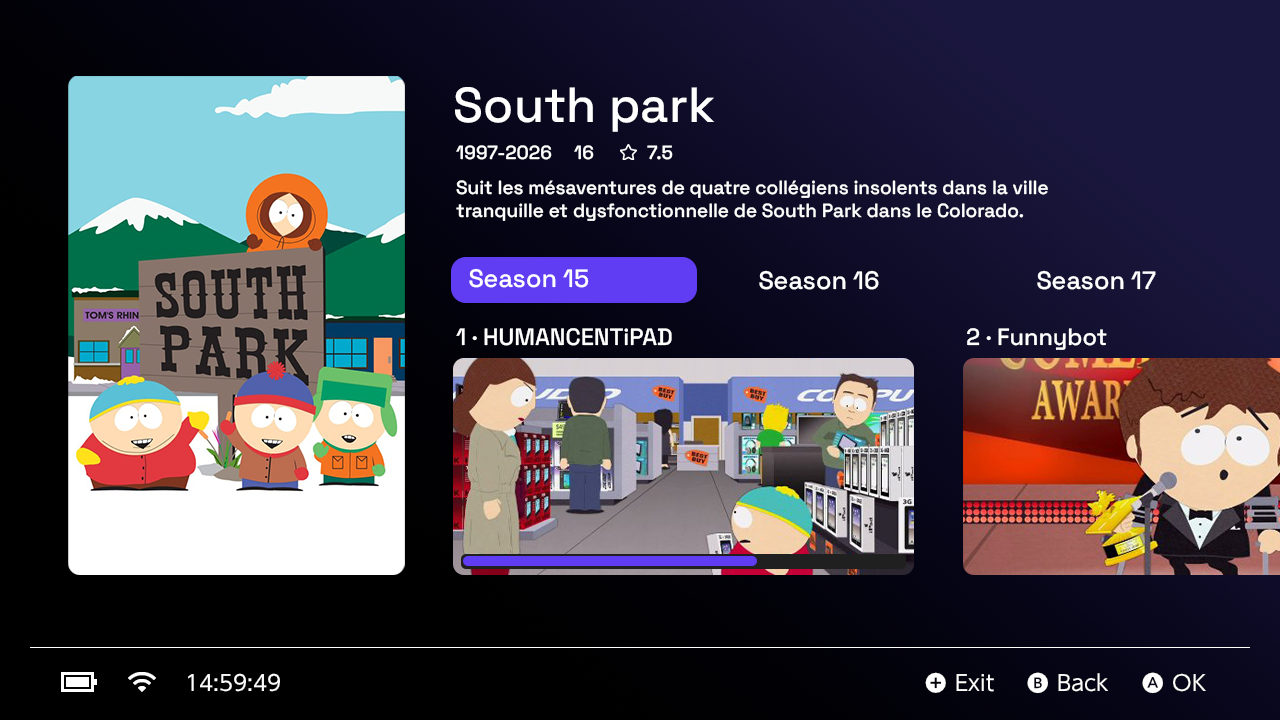
<style>
.page{position:relative;width:1280px;height:720px}
.page>*{position:absolute;margin:0}
.t1{font:49.1px "SpaceGrotesk-Medium";color:#ffffff}
.t2{font:19px "SpaceGrotesk-Medium";color:#ffffff}
.t3{font:25.1px "SpaceGrotesk-Medium";color:#ffffff}
.t4{font:23.6px "SpaceGrotesk-Medium";color:#ffffff}
</style>
<div class="page">
<p class="t1" style="left:455px;top:87px;width:260px;height:45px">South park</p>
<p class="t2" style="left:456px;top:145px;width:96px;height:15px">1997-2026</p>
<p class="t2" style="left:574px;top:145px;width:20px;height:15px">16</p>
<p class="t2" style="left:647px;top:145px;width:26px;height:15px">7.5</p>
<p class="t2" style="left:456px;top:180px;width:592px;height:41px">Suit les mésaventures de quatre collégiens insolents dans la ville tranquille et dysfonctionnelle de South Park dans le Colorado.</p>
<p class="t3" style="left:469px;top:268px;width:120px;height:20px">Season 15</p>
<p class="t3" style="left:759px;top:270px;width:120px;height:20px">Season 16</p>
<p class="t3" style="left:1037px;top:270px;width:119px;height:20px">Season 17</p>
<p class="t4" style="left:456px;top:328px;width:216px;height:18px">1 · HUMANCENTiPAD</p>
<p class="t4" style="left:967px;top:328px;width:140px;height:22px">2 · Funnybot</p>
</div>
